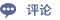
<style>
.page{position:relative;width:60px;height:20px;background:#ffffff}
.page>*{position:absolute;margin:0}
.t1{font:12.8px "HiraginoSansGB-W6";color:#54659b}
</style>
<div class="page">
<p class="t1" style="left:26px;top:4px;width:26px;height:12px">评论</p>
</div>
